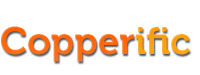
<style>
.page{position:relative;width:200px;height:75px;background:#ffffff}
.page>*{position:absolute;margin:0}
.t1{font:38px "Museo-700";color:#ff6000}
.t2{font:38px "Museo-700";color:#ff9c00}
</style>
<div class="page">
<p class="t1" style="left:1px;top:26px;width:189px;height:36px">Copper<span class="t2">ific</span></p>
</div>
